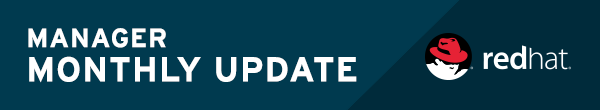
<style>
.page{position:relative;width:600px;height:110px;background:#003a4f}
.page>*{position:absolute;margin:0}
.t1{font:34.6px/34.4px "Interstate-Bold";letter-spacing:0.03em;color:#ffffff;text-transform:uppercase}
.t2{font:26.6px/34.4px "Interstate-Bold";letter-spacing:0.03em;color:#ffffff;text-transform:uppercase}
</style>
<div class="page">
<p class="t1" style="left:28px;top:28px;width:329px;height:55px"><span class="t2">manager <br></span>monthly update</p>
</div>
